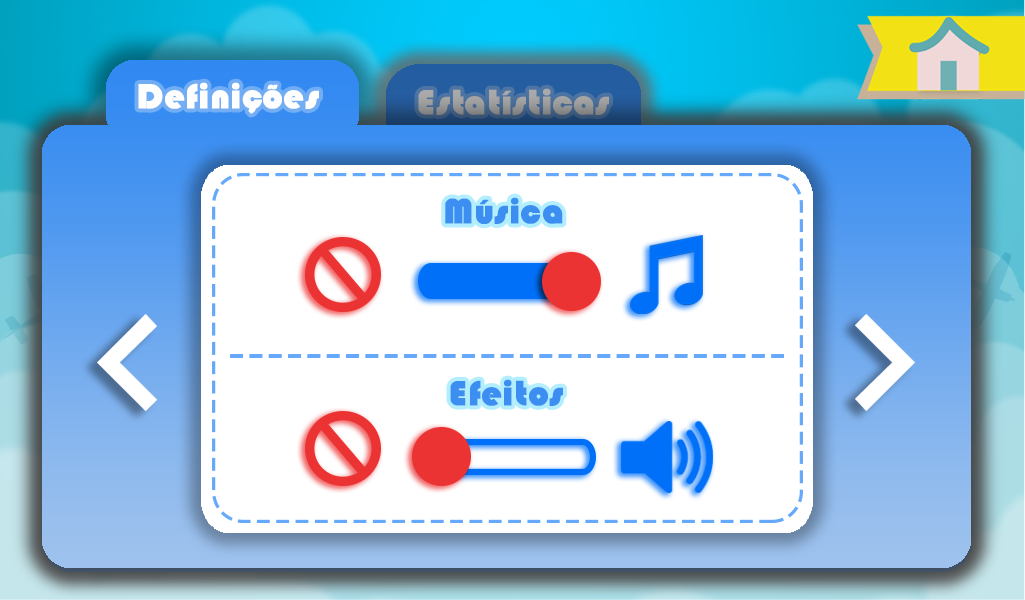
<style>
.page{position:relative;width:1025px;height:600px;background:#ffffff}
.page>*{position:absolute;margin:0}
.t1{font:36px "Blippo-Heavy";color:#ffffff;font-weight:bold}
.t2{font:36px "Blippo-Heavy";color:#3c8ef0;font-weight:bold}
</style>
<div class="page">
<p class="t1" style="left:138px;top:82px;width:181px;height:32px">Definições</p>
<p class="t2" style="left:445px;top:197px;width:118px;height:27px">Música</p>
<p class="t2" style="left:450px;top:379px;width:113px;height:27px">Efeitos</p>
</div>
